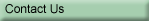
<style>
.page{position:relative;width:149px;height:21px;background:#a6ceaf}
.page>*{position:absolute;margin:0}
.t1{font:12px "ArialMT";color:#000000}
</style>
<div class="page">
<p class="t1" style="left:5px;top:4px;width:59px;height:10px">Contact Us</p>
</div>
